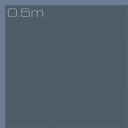
<style>
.page{position:relative;width:128px;height:128px;background:#4e5d69}
.page>*{position:absolute;margin:0}
.t1{font:11px "Michroma";color:#8f98a6}
</style>
<div class="page">
<p class="t1" style="left:7px;top:8px;width:37px;height:9px">0.5m</p>
</div>
